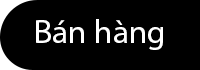
<style>
.page{position:relative;width:200px;height:70px;background:#000000}
.page>*{position:absolute;margin:0}
.t1{font:32.9px "MyriadPro-Regular";color:#fefefe}
</style>
<div class="page">
<p class="t1" style="left:36px;top:19px;width:127px;height:31px">Bán hàng</p>
</div>
